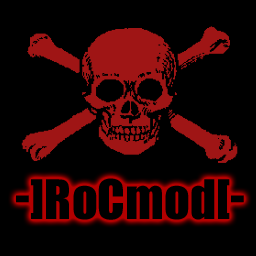
<style>
.page{position:relative;width:256px;height:256px;background:#000000}
.page>*{position:absolute;margin:0}
.t1{font:50.4px "Impact";color:#000000}
</style>
<div class="page">
<p class="t1" style="left:16px;top:178px;width:228px;height:42px">-]RoCmod[-</p>
</div>
